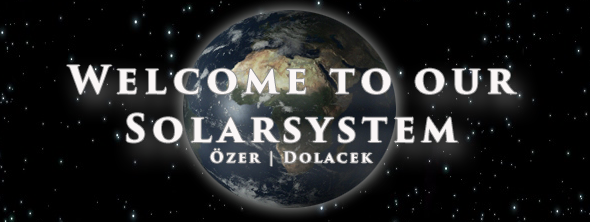
<style>
.page{position:relative;width:590px;height:222px;background:#000000}
.page>*{position:absolute;margin:0}
.t1{font:37.6px/48.6px "TrajanPro3-Bold";letter-spacing:0.14em;color:#faf6f6}
.t2{font:14.6px/20.6px "TrajanPro3-Bold";letter-spacing:0.14em;color:#faf6f6}
</style>
<div class="page">
<p class="t1" style="left:67px;top:65px;width:450px;height:101px;text-align:center">Welcome to our Solarsystem<br><span class="t2">Özer | Dolacek</span></p>
</div>
